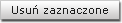
<style>
.page{position:relative;width:122px;height:23px}
.page>*{position:absolute;margin:0}
.t1{font:11px "Verdana";color:#1d1d1d}
</style>
<div class="page">
<p class="t1" style="left:12px;top:5px;width:96px;height:9px">Usuń zaznaczone</p>
</div>
